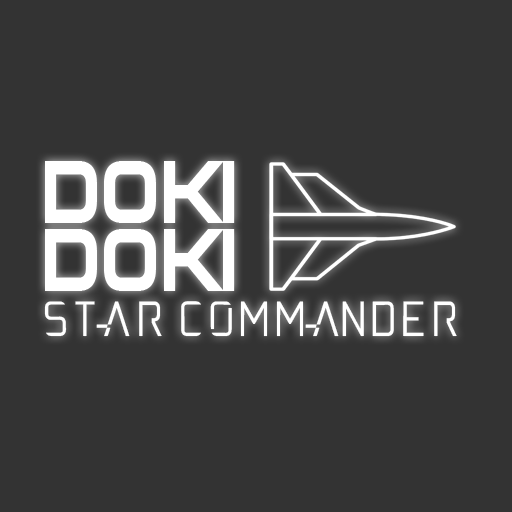
<style>
.page{position:relative;width:512px;height:512px;background:#333333}
.page>*{position:absolute;margin:0}
.t1{font:91.2px/68px "CasanovaScotia";color:#ffffff;scale:0.83 1}
.t2{font:48px "andromeda";letter-spacing:-0.075em;color:#ffffff}
</style>
<div class="page">
<p class="t1" style="left:45px;top:161px;width:190px;height:130px">DOKI<br>DOKI</p>
<p class="t2" style="left:44px;top:301px;width:413px;height:36px">STAR COMMANDER</p>
</div>
